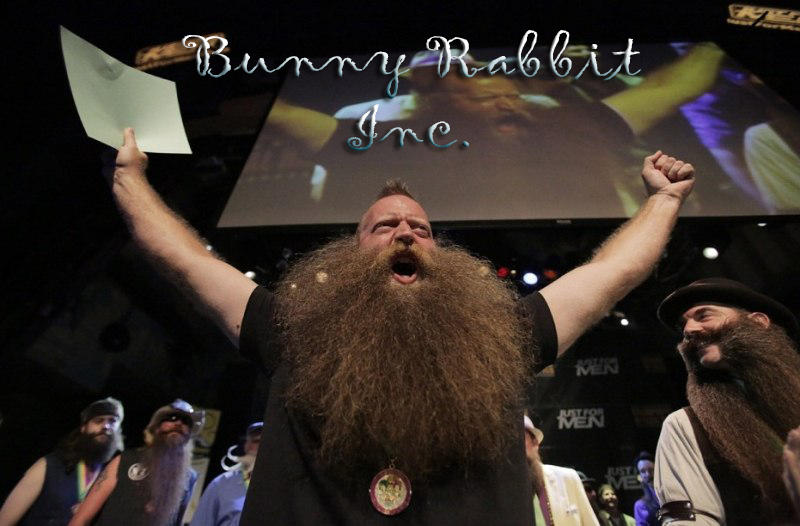
<style>
.page{position:relative;width:800px;height:526px}
.page>*{position:absolute;margin:0}
.t1{font:60px "Gigi-Regular";scale:1.33 1}
</style>
<div class="page">
<p class="t1" style="left:181px;top:30px;width:460px;height:69px">Bunny Rabbit</p>
<p class="t1" style="left:346px;top:104px;width:123px;height:48px">Inc.</p>
</div>
